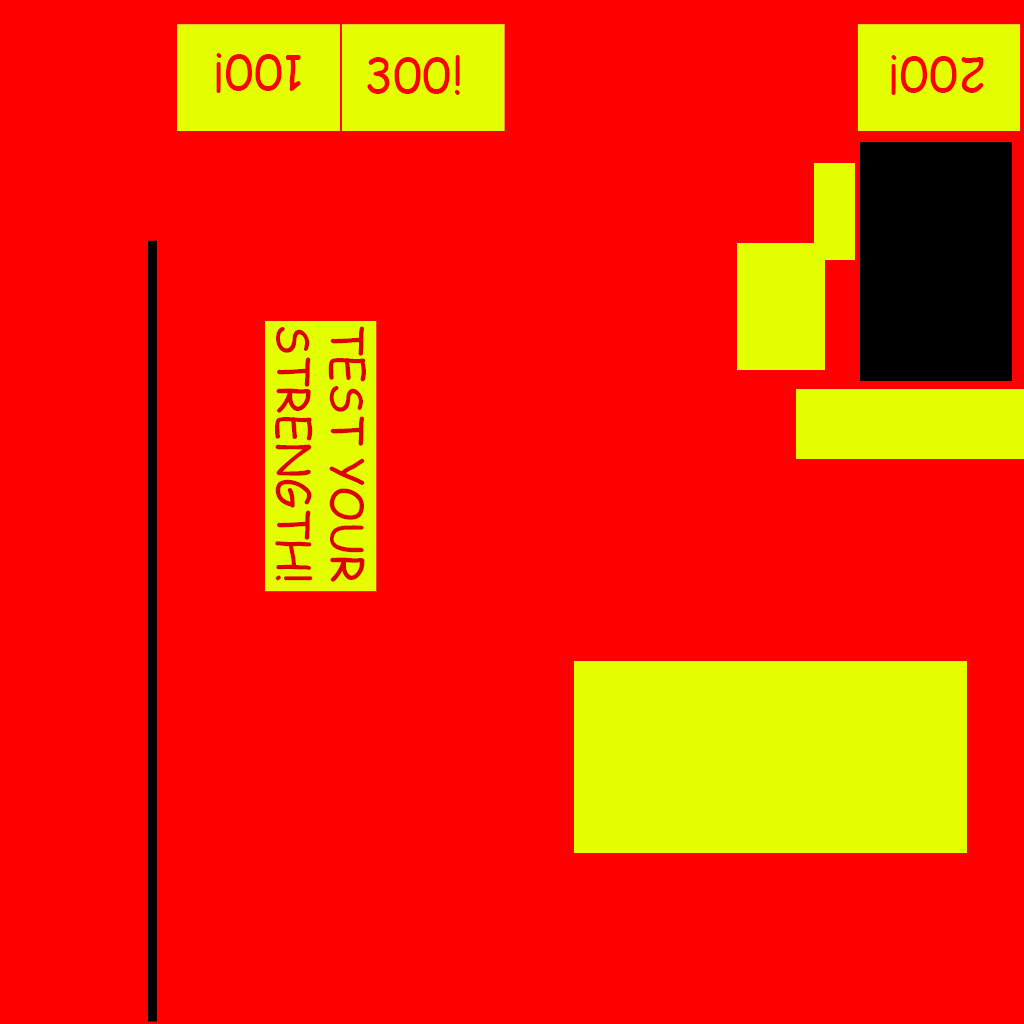
<style>
.page{position:relative;width:1024px;height:1024px;background:#ff0000}
.page>*{position:absolute;margin:0}
.t1{font:48px "ComicSansMS";color:#ff0000}
.t2{font:44.8px "ComicSansMS";color:#dd0000}
</style>
<div class="page">
<p class="t1" style="left:216px;top:53px;width:85px;height:40px;rotate:180deg">100!</p>
<p class="t1" style="left:367px;top:55px;width:93px;height:40px">300!</p>
<p class="t1" style="left:891px;top:55px;width:93px;height:40px;rotate:180deg">200!</p>
<p class="t2" style="left:275px;top:326px;width:91px;height:256px;rotate:90deg">TEST YOUR<br>STRENGTH!</p>
</div>
